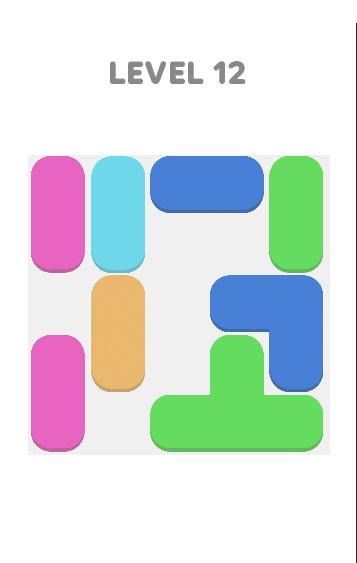
<style>
.page{position:relative;width:357px;height:563px;background:#ffffff}
.page>*{position:absolute;margin:0}
.t1{font:35px "VolteRounded-Bold";color:#898989}
</style>
<div class="page">
<p class="t1" style="left:110px;top:61px;width:136px;height:23px">LEVEL 12</p>
</div>
